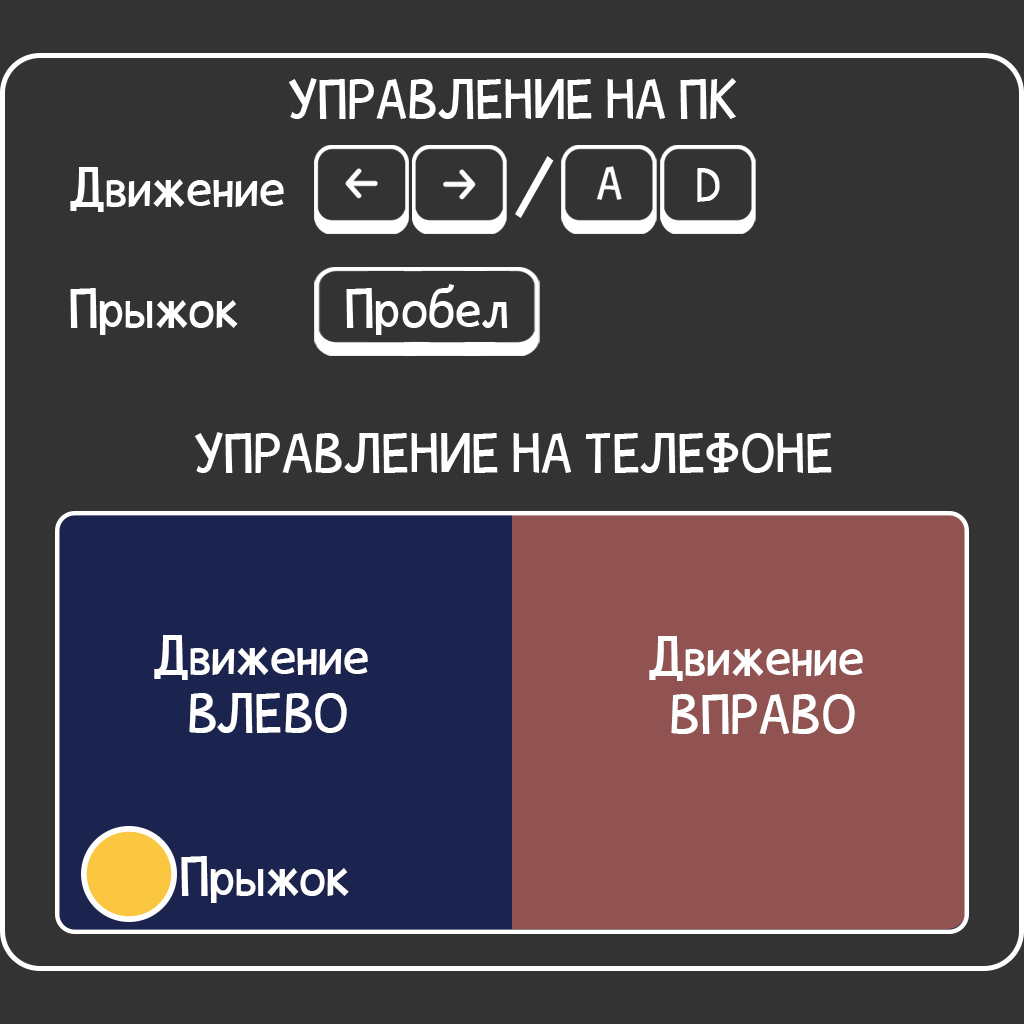
<style>
.page{position:relative;width:1024px;height:1024px;background:#333333}
.page>*{position:absolute;margin:0}
.t1{font:48px "CrazyV1";color:#ffffff}
</style>
<div class="page">
<p class="t1" style="left:288px;top:78px;width:449px;height:41px">УПРАВЛЕНИЕ НА ПК</p>
<p class="t1" style="left:70px;top:167px;width:214px;height:45px">Движение</p>
<p class="t1" style="left:70px;top:288px;width:168px;height:47px">Прыжок</p>
<p class="t1" style="left:346px;top:284px;width:162px;height:51px">Пробел</p>
<p class="t1" style="left:194px;top:432px;width:638px;height:41px">УПРАВЛЕНИЕ НА ТЕЛЕФОНЕ</p>
<p class="t1" style="left:154px;top:635px;width:214px;height:98px;text-align:center">Движение <br>ВЛЕВО</p>
<p class="t1" style="left:649px;top:636px;width:214px;height:98px;text-align:center">Движение <br>ВПРАВО</p>
<p class="t1" style="left:181px;top:856px;width:168px;height:47px">Прыжок</p>
</div>
